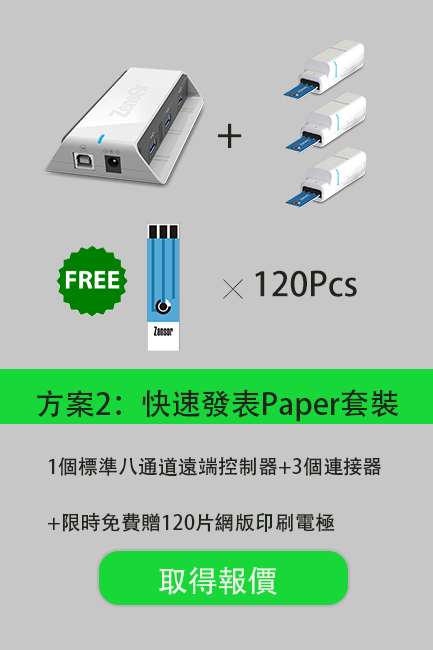
<style>
.page{position:relative;width:433px;height:650px;background:#c7c7c7}
.page>*{position:absolute;margin:0}
.t1{font:40px "AdobeHeitiStd-Regular";color:#1f241c}
.t2{font:33.3px "AdobeHeitiStd-Regular";color:#1f241c}
.t3{font:20px "SimHei";color:#1f241c}
.t4{font:30px "AdobeHeitiStd-Regular";color:#1f241c}
.t5{font:20px/55.5px "AdobeHeitiStd-Regular";color:#1f241c}
.t6{font:30px "AdobeHeitiStd-Regular";color:#ebf2e7}
</style>
<div class="page">
<p class="t1" style="left:218px;top:123px;width:24px;height:25px">＋</p>
<p class="t2" style="left:223px;top:270px;width:134px;height:29px"><span class="t3">╳  </span>120Pcs</p>
<p class="t4" style="left:37px;top:389px;width:362px;height:33px">方案2：快速發表Paper套裝</p>
<p class="t5" style="left:48px;top:457px;width:333px;height:75px">1個標準八通道遠端控制器+3個連接器<br>+限時免費贈120片網版印刷電極</p>
<p class="t6" style="left:159px;top:566px;width:118px;height:29px">取得報價</p>
</div>
